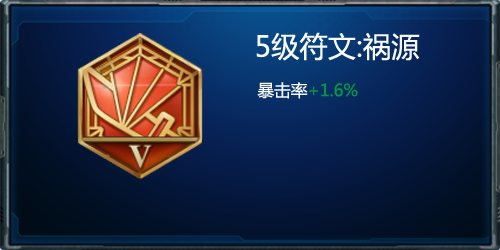
<style>
.page{position:relative;width:500px;height:250px}
.page>*{position:absolute;margin:0}
.t1{font:28.3px "MicrosoftYaHei";color:#f7faf8}
.t2{font:16.7px "MicrosoftYaHei";color:#f7faf8}
.t3{font:16.7px "MicrosoftYaHei";color:#009944}
</style>
<div class="page">
<p class="t1" style="left:256px;top:32px;width:164px;height:67px;text-align:center">5级符文:祸源<br><span class="t2">        暴击率</span><span class="t3">+1.6%</span></p>
</div>
